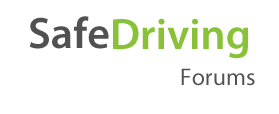
<style>
.page{position:relative;width:279px;height:114px;background:#ffffff}
.page>*{position:absolute;margin:0}
.t1{font:44px "MyriadPro-Semibold";color:#515151}
.t2{font:44px "MyriadPro-Semibold";color:#89c138}
.t3{font:24px "MyriadPro-Regular";color:#515151}
</style>
<div class="page">
<p class="t1" style="left:29px;top:16px;width:80px;height:33px">Safe</p>
<p class="t2" style="left:113px;top:18px;width:136px;height:41px">Driving</p>
<p class="t3" style="left:181px;top:68px;width:74px;height:18px">Forums</p>
</div>
